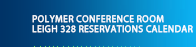
<style>
.page{position:relative;width:196px;height:47px}
.page>*{position:absolute;margin:0}
.t1{font:9.9px/10px "Myriad-Roman";color:#ffffff;text-transform:uppercase;font-weight:bold}
</style>
<div class="page">
<p class="t1" style="left:32px;top:15px;width:161px;height:18px">Polymer conference room<br>leigh 328 reservations calendar</p>
</div>
